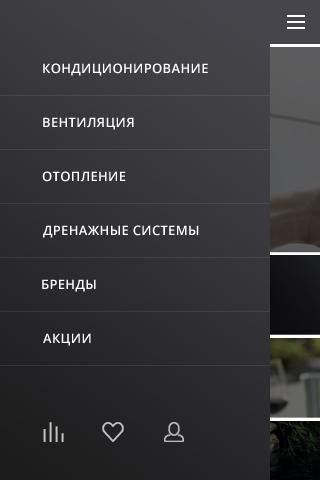
<style>
.page{position:relative;width:320px;height:480px}
.page>*{position:absolute;margin:0}
.t1{font:13px "OpenSans-Semibold";letter-spacing:0.025em;color:#ffffff;text-transform:uppercase}
</style>
<div class="page">
<p class="t1" style="left:43px;top:63px;width:165px;height:13px">кондиционирование</p>
<p class="t1" style="left:43px;top:117px;width:91px;height:13px">вентиляция</p>
<p class="t1" style="left:42px;top:171px;width:84px;height:11px">отопление</p>
<p class="t1" style="left:43px;top:225px;width:156px;height:13px">дренажные системы</p>
<p class="t1" style="left:42px;top:279px;width:54px;height:13px">бренды</p>
<p class="t1" style="left:43px;top:333px;width:48px;height:13px">акции</p>
</div>
